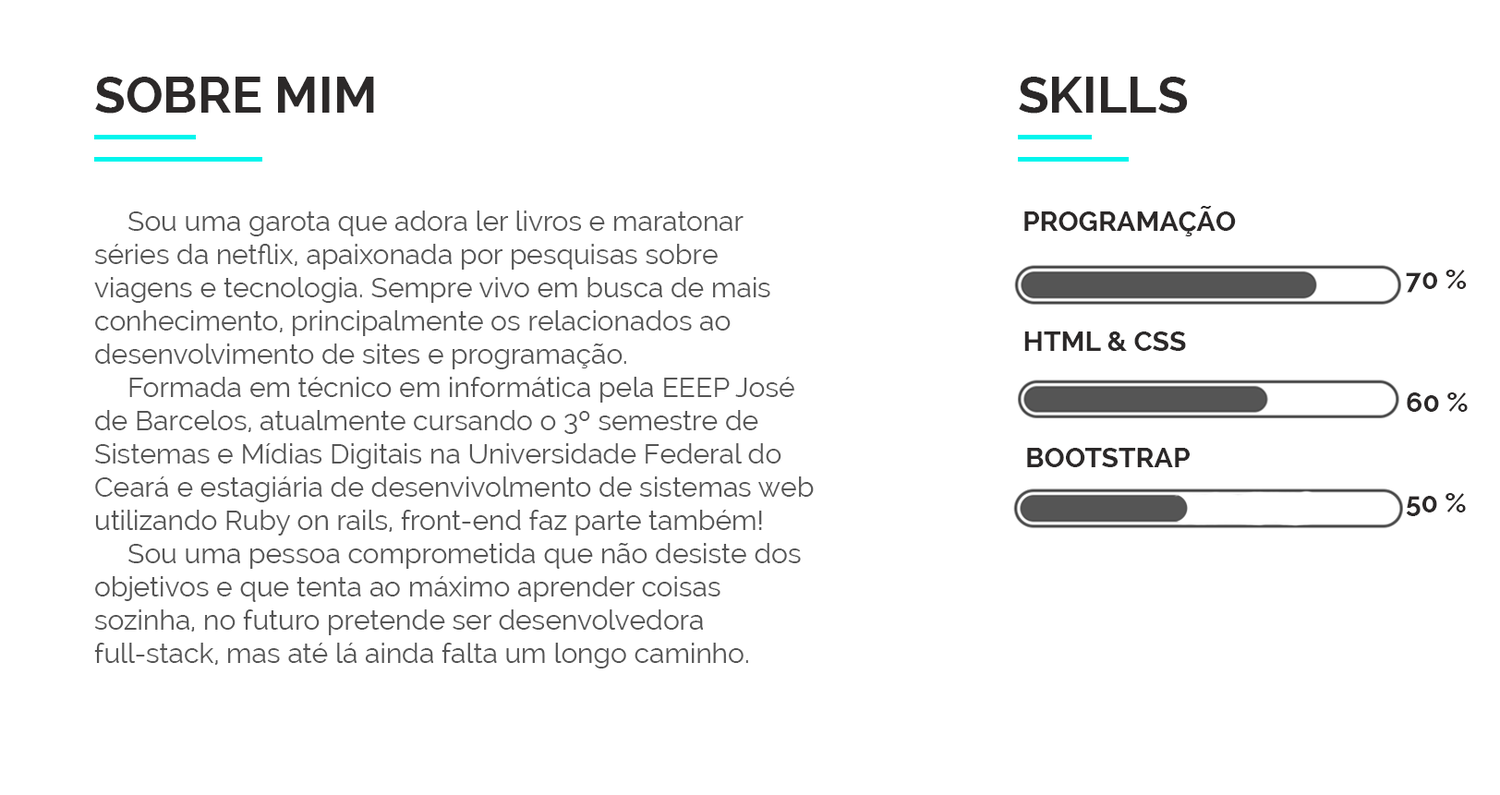
<style>
.page{position:relative;width:1500px;height:795px;background:#ffffff}
.page>*{position:absolute;margin:0}
.t1{font:50.8px "Raleway-Bold";color:#2c2929}
.t2{font:50.8px "Raleway-Bold";color:#2b2828}
.t3{font:27.7px "Raleway-Bold";color:#2b2828}
.t4{font:27.7px "Raleway";color:#555555}
</style>
<div class="page">
<p class="t1" style="left:95px;top:77px;width:279px;height:37px">SOBRE MIM</p>
<p class="t2" style="left:1019px;top:77px;width:169px;height:37px">SKILLS</p>
<p class="t3" style="left:1024px;top:206px;width:212px;height:30px">PROGRAMAÇÃO</p>
<p class="t4" style="left:94px;top:211px;width:720px;height:458px">Sou uma garota que adora ler livros e maratonar séries da netflix, apaixonada por pesquisas sobre viagens e tecnologia. Sempre vivo em busca de mais conhecimento, principalmente os relacionados ao desenvolvimento de sites e programação.<br> Formada em técnico em informática pela EEEP José de Barcelos, atualmente cursando o 3º semestre de Sistemas e Mídias Digitais na Universidade Federal do Ceará e estagiária de desenvivolmento de sistemas web utilizando Ruby on rails, front-end faz parte também!<br> Sou uma pessoa comprometida que não desiste dos objetivos e que tenta ao máximo aprender coisas sozinha, no futuro pretende ser desenvolvedora full-stack, mas até lá ainda falta um longo caminho.</p>
<p class="t3" style="left:1406px;top:270px;width:60px;height:23px">70 %</p>
<p class="t3" style="left:1024px;top:332px;width:162px;height:19px">HTML &amp; CSS</p>
<p class="t3" style="left:1406px;top:392px;width:61px;height:20px">60 %</p>
<p class="t3" style="left:1027px;top:448px;width:162px;height:19px">BOOTSTRAP</p>
<p class="t3" style="left:1406px;top:493px;width:60px;height:23px">50 %</p>
</div>
